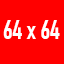
<style>
.page{position:relative;width:64px;height:64px;background:#ff0000}
.page>*{position:absolute;margin:0}
.t1{font:26px "DINCondensed-Bold";color:#ffffff}
</style>
<div class="page">
<p class="t1" style="left:3px;top:20px;width:57px;height:19px">64 x 64</p>
</div>
